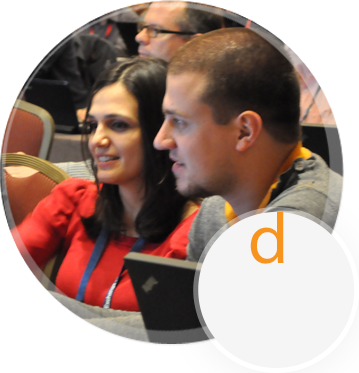
<style>
.page{position:relative;width:359px;height:373px;background:#ffffff}
.page>*{position:absolute;margin:0}
.t1{font:72px "MyriadPro-Regular";color:#f7941e}
</style>
<div class="page">
<p class="t1" style="left:250px;top:212px;width:34px;height:52px">d</p>
</div>
